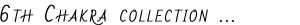
<style>
.page{position:relative;width:300px;height:25px;background:#ffffff}
.page>*{position:absolute;margin:0}
.t1{font:17px "BadScript-Regular";letter-spacing:0.2em;color:#000000;font-variant:small-caps;font-weight:bold}
</style>
<div class="page">
<p class="t1" style="left:0px;top:4px;width:234px;height:21px">6th Chakra collection ...</p>
</div>
